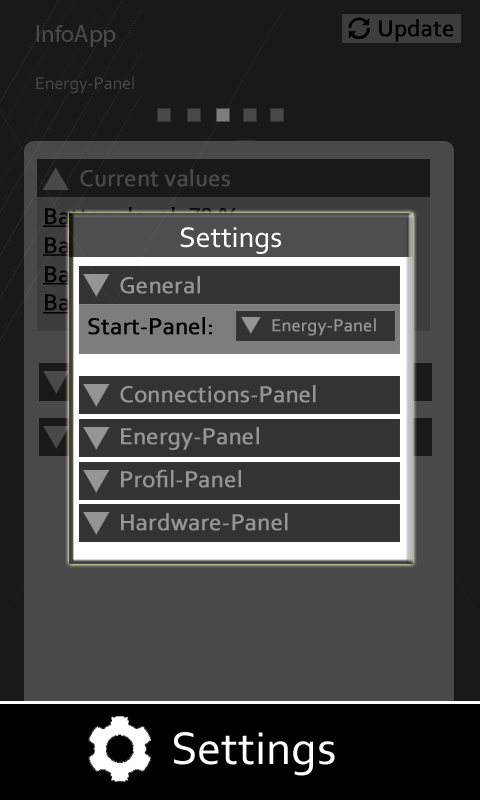
<style>
.page{position:relative;width:480px;height:800px;background:#191919}
.page>*{position:absolute;margin:0}
.t1{font:30px "Corbel";color:#ffffff}
.t2{font:24px "Corbel";color:#959595;font-weight:bold}
.t3{font:24px "Corbel";color:#000000;font-weight:bold}
.t4{font:18px "Corbel";color:#959595;font-weight:bold}
.t5{font:48px "Corbel";color:#ffffff}
</style>
<div class="page">
<p class="t1" style="left:180px;top:227px;width:101px;height:27px">Settings</p>
<p class="t2" style="left:120px;top:276px;width:80px;height:18px">General</p>
<p class="t3" style="left:88px;top:317px;width:124px;height:18px">Start-Panel:</p>
<p class="t4" style="left:272px;top:318px;width:104px;height:18px">Energy-Panel</p>
<p class="t2" style="left:120px;top:385px;width:196px;height:18px">Connections-Panel</p>
<p class="t2" style="left:121px;top:427px;width:138px;height:23px">Energy-Panel</p>
<p class="t2" style="left:121px;top:469px;width:120px;height:19px">Profil-Panel</p>
<p class="t2" style="left:121px;top:513px;width:167px;height:18px">Hardware-Panel</p>
<p class="t5" style="left:174px;top:732px;width:161px;height:44px">Settings</p>
</div>
